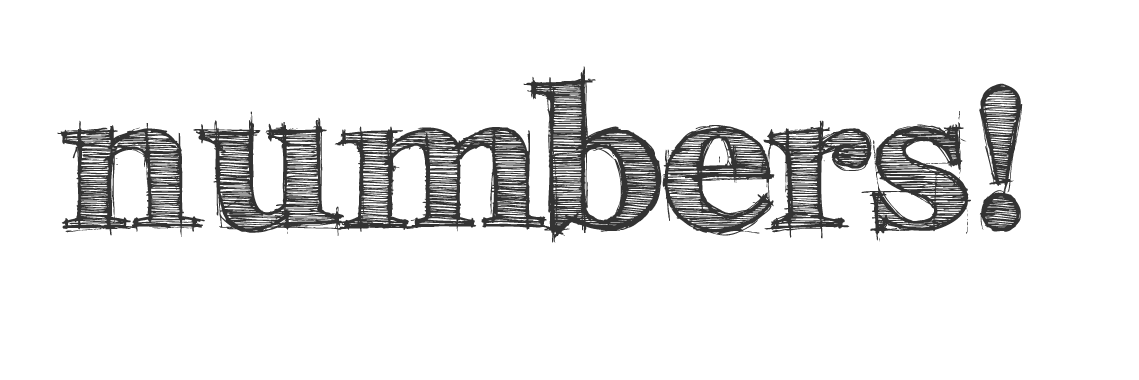
<style>
.page{position:relative;width:1139px;height:380px;background:#ffffff}
.page>*{position:absolute;margin:0}
.t1{font:200px "FFFTusj-Bold";color:#333333}
</style>
<div class="page">
<p class="t1" style="left:57px;top:66px;width:966px;height:177px">numbers!</p>
</div>
